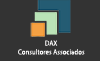
<style>
.page{position:relative;width:100px;height:61px;background:#333333}
.page>*{position:absolute;margin:0}
.t1{font:7.4px "MyriadPro-Regular";letter-spacing:0.015em;color:#fefdfd;scale:0.9 1}
.t2{font:12.1px "MyriadPro-Regular";letter-spacing:0.015em;color:#fefdfd;scale:0.9 1}
</style>
<div class="page">
<p class="t1" style="left:18px;top:40px;width:67px;height:15px"><span class="t2">           </span>DAX<br>Consultores Associados</p>
</div>
